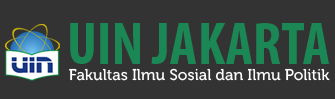
<style>
.page{position:relative;width:335px;height:99px;background:#333333}
.page>*{position:absolute;margin:0}
.t1{font:60px "MyriadPro-BoldCond";color:#1b8755;text-transform:uppercase}
.t2{font:15.5px "Museo-500";color:#ffffff}
</style>
<div class="page">
<p class="t1" style="left:70px;top:23px;width:259px;height:41px">UIN JAKARTA</p>
<p class="t2" style="left:69px;top:68px;width:261px;height:13px">Fakultas Ilmu Sosial dan Ilmu Politik</p>
</div>
